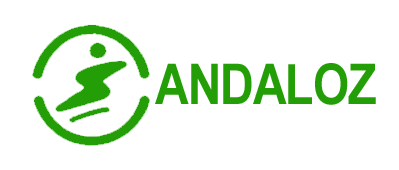
<style>
.page{position:relative;width:399px;height:170px;background:#ffffff}
.page>*{position:absolute;margin:0}
.t1{font:56px "Arial-BoldMT";letter-spacing:-0.022em;color:#239e06;scale:0.83 1}
</style>
<div class="page">
<p class="t1" style="left:155px;top:63px;width:221px;height:42px">ANDALOZ</p>
</div>
